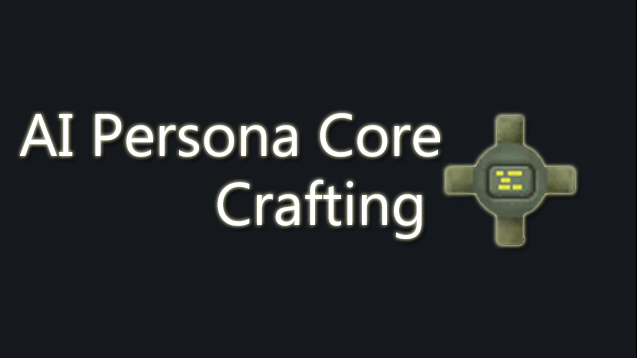
<style>
.page{position:relative;width:637px;height:358px;background:#15181d}
.page>*{position:absolute;margin:0}
.t1{font:60px "MyanmarText";color:#ffffff}
</style>
<div class="page">
<p class="t1" style="left:19px;top:113px;width:421px;height:44px">AI Persona Core</p>
<p class="t1" style="left:217px;top:179px;width:205px;height:60px">Crafting</p>
</div>
